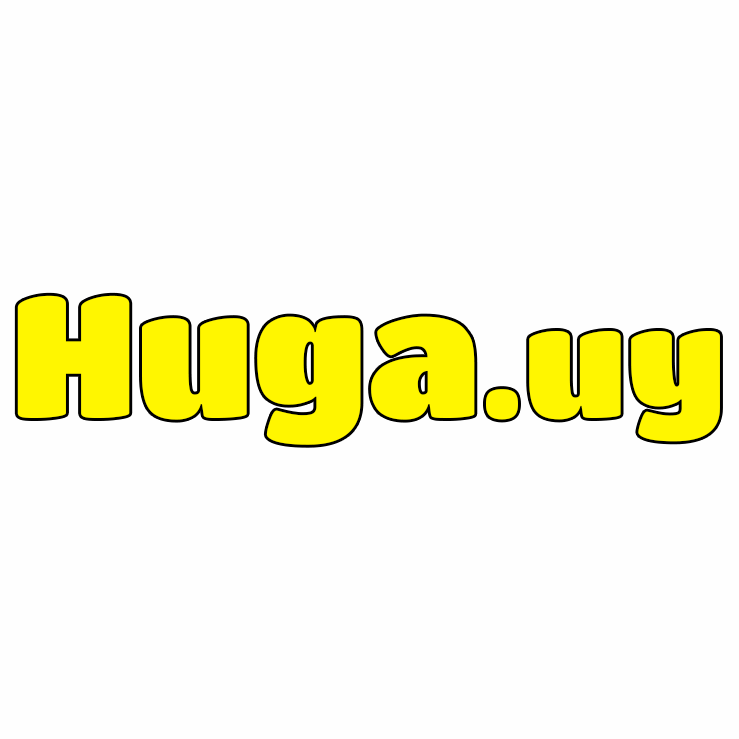
<style>
.page{position:relative;width:739px;height:739px;background:#fefefe}
.page>*{position:absolute;margin:0}
.t1{font:172px "TitanOne";color:#fff600}
.t2{font:150px "TitanOne";color:#fff600}
</style>
<div class="page">
<p class="t1" style="left:17px;top:295px;width:703px;height:150px">Huga<span class="t2">.uy</span></p>
</div>
